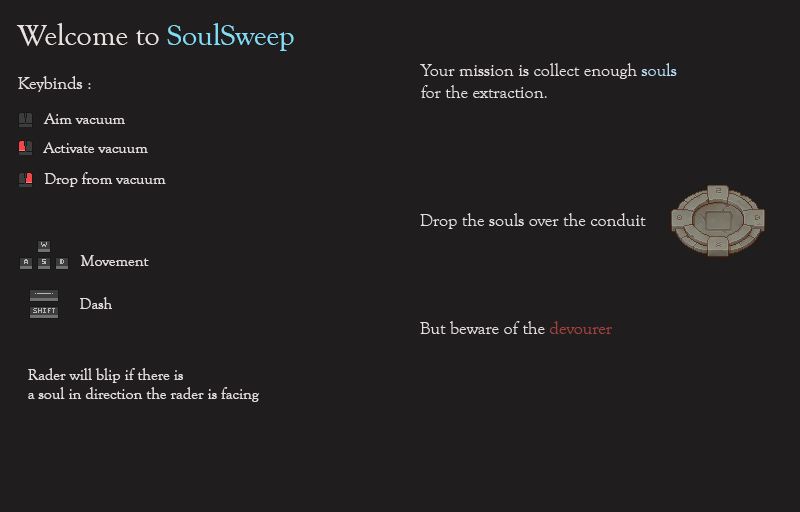
<style>
.page{position:relative;width:800px;height:512px;background:#1f1d1d}
.page>*{position:absolute;margin:0}
.t1{font:30px "GoudyOldStyleT-Regular";color:#eae1e1}
.t2{font:30px "GoudyOldStyleT-Regular";color:#84ddf6}
.t3{font:18px "GoudyOldStyleT-Regular";color:#e4dddd}
.t4{font:16px "GoudyOldStyleT-Regular";color:#e4dddd}
</style>
<div class="page">
<p class="t1" style="left:16px;top:23px;width:278px;height:28px">Welcome to <span class="t2">SoulSweep</span></p>
<p class="t3" style="left:18px;top:76px;width:73px;height:16px">Keybinds :</p>
<p class="t4" style="left:43px;top:113px;width:82px;height:11px">Aim vacuum</p>
<p class="t4" style="left:43px;top:142px;width:105px;height:11px">Activate vacuum</p>
<p class="t4" style="left:44px;top:172px;width:122px;height:15px">Drop from vacuum</p>
<p class="t4" style="left:80px;top:255px;width:69px;height:11px">Movement</p>
<p class="t4" style="left:80px;top:297px;width:32px;height:12px">Dash</p>
<p class="t4" style="left:28px;top:368px;width:231px;height:34px">Rader will blip if there is <br>a soul in direction the rader is facing</p>
</div>
